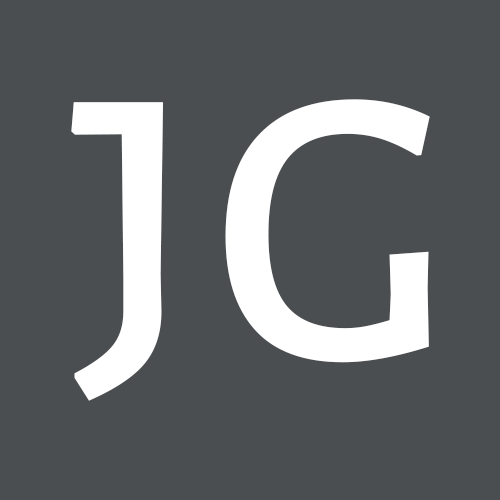
<style>
.page{position:relative;width:500px;height:500px;background:#4b4e50}
.page>*{position:absolute;margin:0}
.t1{font:400px "AlegreyaSans-Medium";letter-spacing:0.05em;color:#ffffff}
</style>
<div class="page">
<p class="t1" style="left:71px;top:99px;width:359px;height:302px">JG</p>
</div>
